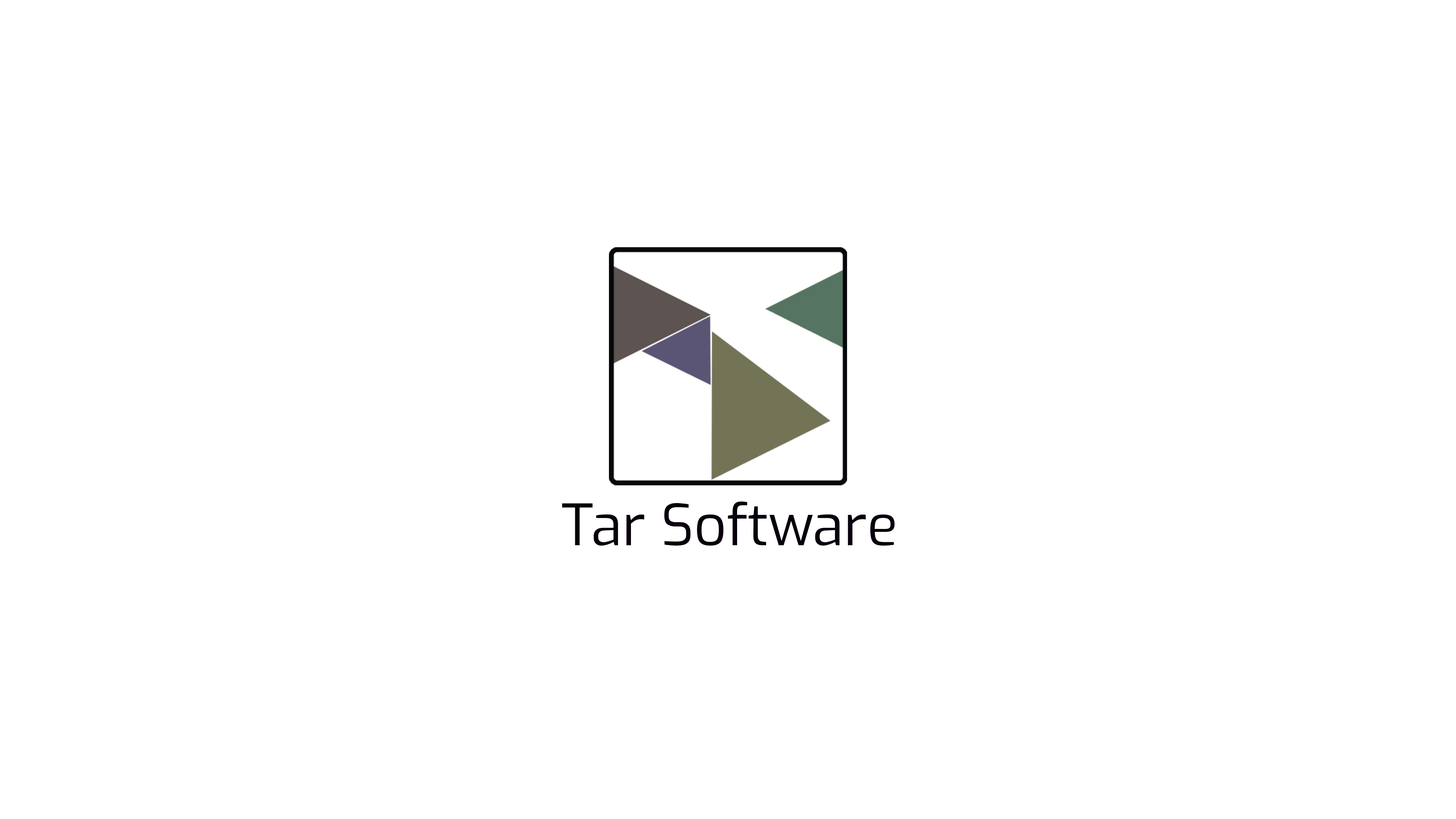
<style>
.page{position:relative;width:1456px;height:819px;background:#ffffff}
.page>*{position:absolute;margin:0}
.t1{font:56.9px "Exo-Regular";color:#08000c}
</style>
<div class="page">
<p class="t1" style="left:562px;top:501px;width:333px;height:45px">Tar Software</p>
</div>
